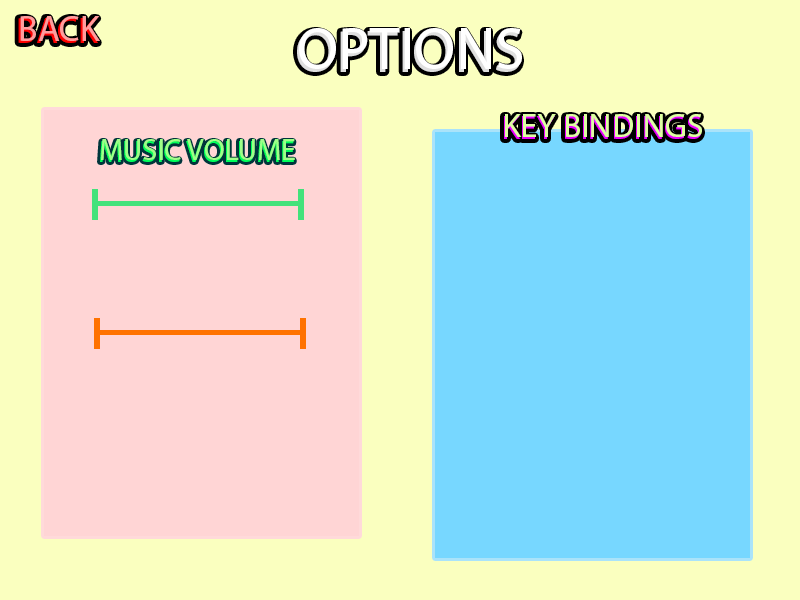
<style>
.page{position:relative;width:800px;height:600px;background:#faffbf}
.page>*{position:absolute;margin:0}
.t1{font:36px "MyriadPro-Regular";color:#ff9d9d}
.t2{font:36px "MyriadPro-Regular"}
.t3{font:60px "MyriadPro-Regular";color:#ffffff}
.t4{font:34px "MyriadPro-Regular"}
.t5{font:34px "MyriadPro-Regular";color:#ddffa2}
.t6{font:30px "MyriadPro-Regular"}
.t7{font:30px "MyriadPro-Regular";color:#9fff89}
</style>
<div class="page">
<p class="t1" style="left:20px;top:16px;width:80px;height:25px">BACK</p>
<p class="t2" style="left:18px;top:18px;width:80px;height:25px">BACK</p>
<p class="t3" style="left:299px;top:28px;width:223px;height:41px">OPTIONS</p>
<p class="t3" style="left:297px;top:31px;width:223px;height:41px">OPTIONS</p>
<p class="t4" style="left:504px;top:116px;width:197px;height:23px">KEY BINDINGS</p>
<p class="t5" style="left:505px;top:114px;width:197px;height:23px">KEY BINDINGS</p>
<p class="t6" style="left:100px;top:141px;width:194px;height:21px">MUSIC VOLUME</p>
<p class="t7" style="left:101px;top:139px;width:194px;height:21px">MUSIC VOLUME</p>
</div>
